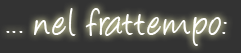
<style>
.page{position:relative;width:241px;height:53px;background:#333333}
.page>*{position:absolute;margin:0}
.t1{font:44.8px "Angelina";color:#ffffff}
</style>
<div class="page">
<p class="t1" style="left:6px;top:8px;width:221px;height:38px">... nel frattempo:</p>
</div>
